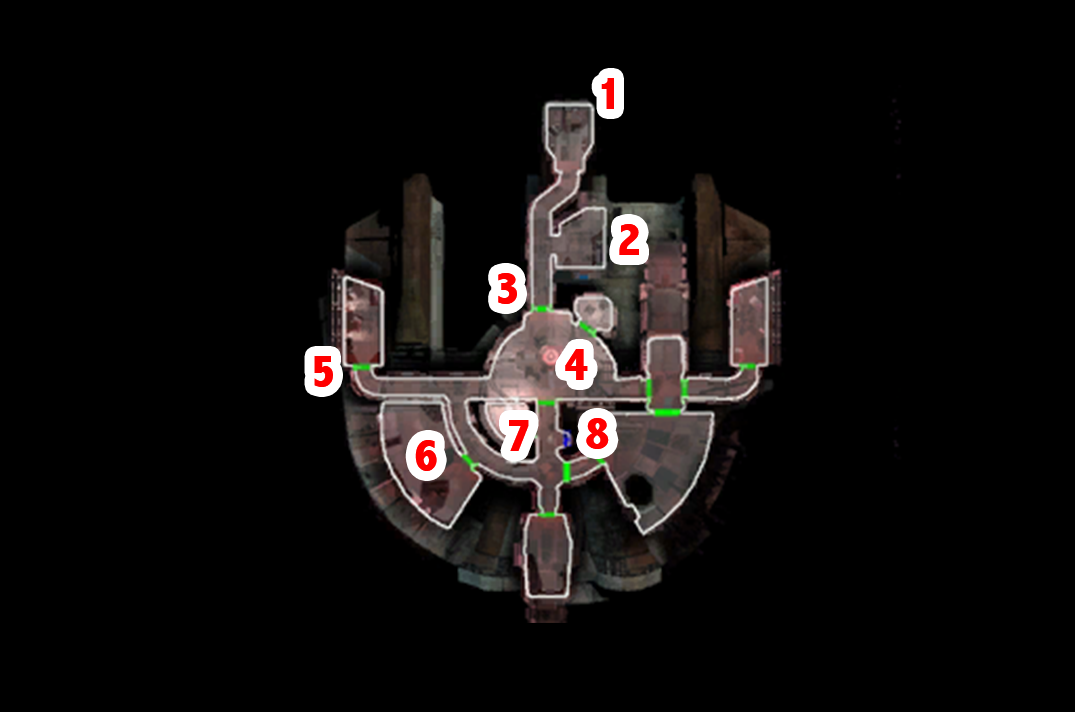
<style>
.page{position:relative;width:1075px;height:712px;background:#000000}
.page>*{position:absolute;margin:0}
.t1{font:48px "AbadiMT-CondensedExtraBold";color:#ff0000}
</style>
<div class="page">
<p class="t1" style="left:601px;top:78px;width:13px;height:31px">1</p>
<p class="t1" style="left:619px;top:224px;width:20px;height:31px">2</p>
<p class="t1" style="left:498px;top:273px;width:19px;height:31px">3</p>
<p class="t1" style="left:565px;top:349px;width:23px;height:31px">4</p>
<p class="t1" style="left:314px;top:356px;width:19px;height:31px">5</p>
<p class="t1" style="left:509px;top:420px;width:20px;height:31px">7</p>
<p class="t1" style="left:586px;top:418px;width:23px;height:31px">8</p>
<p class="t1" style="left:415px;top:440px;width:22px;height:31px">6</p>
</div>
